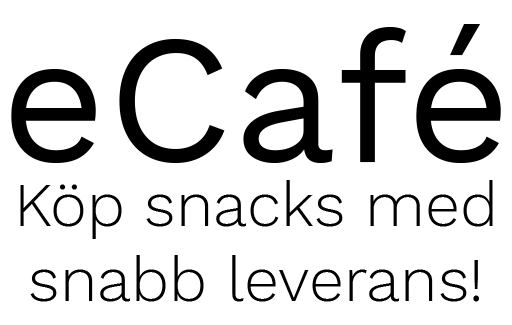
<style>
.page{position:relative;width:512px;height:325px;background:#ffffff}
.page>*{position:absolute;margin:0}
.t1{font:183.3px "WorkSans-Regular";color:#000000}
.t2{font:62.5px "WorkSans-Light";color:#000000}
</style>
<div class="page">
<p class="t1" style="left:11px;top:24px;width:490px;height:139px">eCafé</p>
<p class="t2" style="left:20px;top:180px;width:473px;height:122px;text-align:center">Köp snacks med<br>snabb leverans!</p>
</div>
